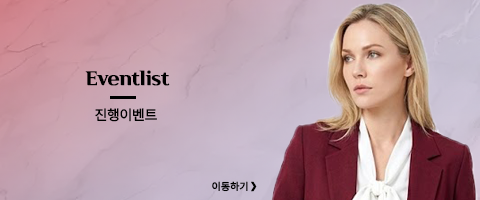
<style>
.page{position:relative;width:480px;height:200px}
.page>*{position:absolute;margin:0}
.t1{font:20px "Cafe24Danjunghae";letter-spacing:-0.025em;color:#000000;font-weight:bold}
.t2{font:14px "NotoSansKR-Regular";letter-spacing:-0.025em;color:#000000;font-weight:bold}
.t3{font:10px "NotoSansKR-Medium";letter-spacing:-0.025em;color:#000000;font-weight:bold}
.t4{font:12px "KBLJump_BTTF";letter-spacing:-0.025em;color:#000000;font-weight:bold}
</style>
<div class="page">
<p class="t1" style="left:85px;top:70px;width:85px;height:16px">Eventlist</p>
<p class="t2" style="left:95px;top:108px;width:62px;height:14px">진행이벤트</p>
<p class="t3" style="left:212px;top:181px;width:36px;height:11px">이동하기</p>
<p class="t4" style="left:251px;top:181px;width:6px;height:11px">&gt;</p>
</div>
